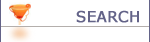
<style>
.page{position:relative;width:150px;height:42px;background:#ffffff}
.page>*{position:absolute;margin:0}
.t1{font:15px "Verdana";color:#636388;font-weight:bold}
</style>
<div class="page">
<p class="t1" style="left:76px;top:10px;width:63px;height:13px">SEARCH</p>
</div>
